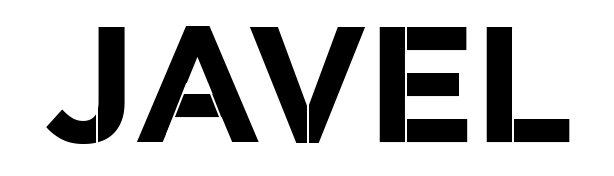
<style>
.page{position:relative;width:614px;height:176px;background:#ffffff}
.page>*{position:absolute;margin:0}
.t1{font:164px "Gotham-Bold";letter-spacing:-0.02em;color:#000000}
.t2{font:164px "Gotham-Bold";letter-spacing:-0.1em;color:#000000}
</style>
<div class="page">
<p class="t1" style="left:46px;top:26px;width:524px;height:118px">J<span class="t2">A</span>VEL</p>
</div>
